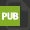
<style>
.page{position:relative;width:30px;height:30px;background:#83ae26}
.page>*{position:absolute;margin:0}
.t1{font:8px "HeadlineR-HM";letter-spacing:-0.075em;color:#ffffff}
</style>
<div class="page">
<p class="t1" style="left:2px;top:12px;width:17px;height:8px">PUB</p>
</div>
